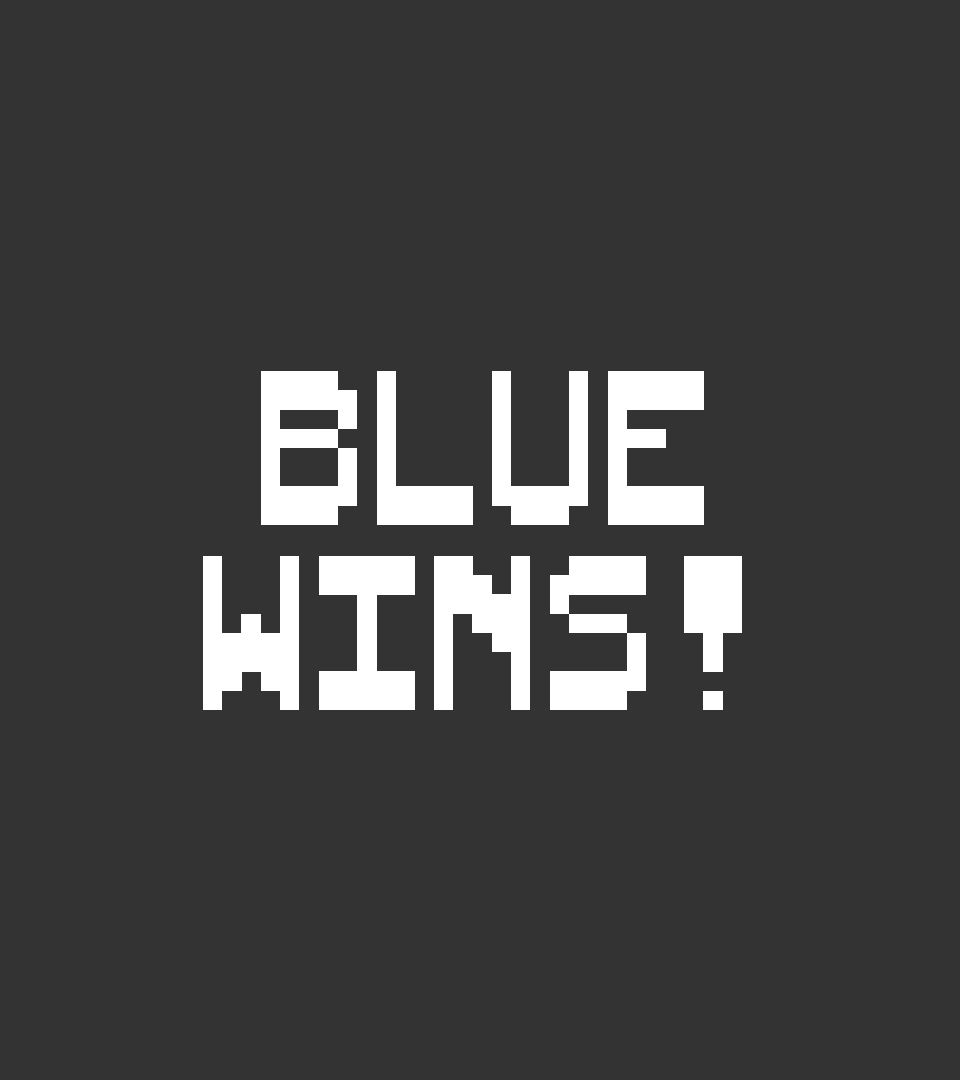
<style>
.page{position:relative;width:960px;height:1080px;background:#333333}
.page>*{position:absolute;margin:0}
.t1{font:154px "WildBillYonder";color:#ffffff}
</style>
<div class="page">
<p class="t1" style="left:203px;top:371px;width:539px;height:339px;text-align:center">BLUE<br>WINS!</p>
</div>
